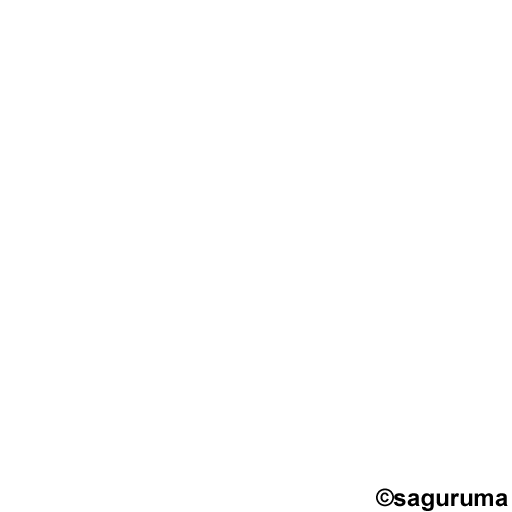
<style>
.page{position:relative;width:512px;height:512px;background:#ffffff}
.page>*{position:absolute;margin:0}
.t1{font:24px "Arial-BoldMT";color:#000000}
</style>
<div class="page">
<p class="t1" style="left:376px;top:488px;width:132px;height:23px">©saguruma</p>
</div>
